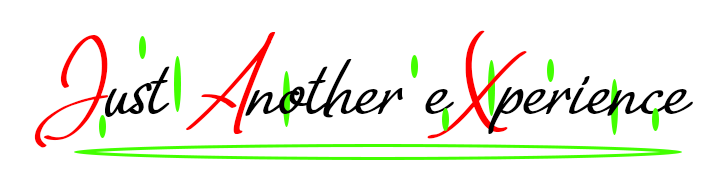
<style>
.page{position:relative;width:728px;height:180px;background:#ffffff}
.page>*{position:absolute;margin:0}
.t1{font:149.3px "Tripolitania";color:#000000}
.t2{font:149.3px "Tripolitania";color:#ff0000}
</style>
<div class="page">
<p class="t1" style="left:34px;top:30px;width:659px;height:118px"><span class="t2">J</span>ust <span class="t2">A</span>nother e<span class="t2">X</span>perience</p>
</div>
